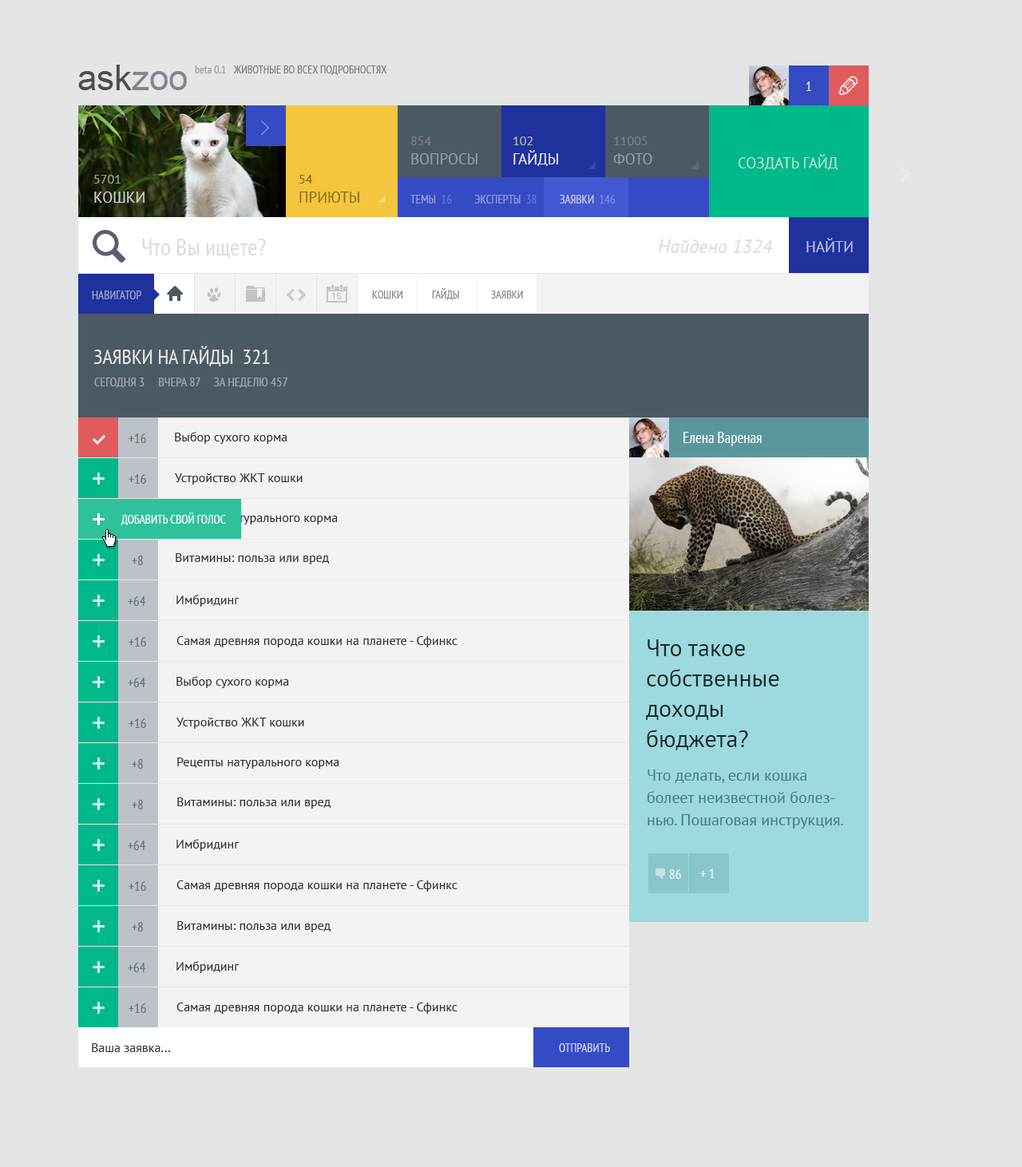
<style>
.page{position:relative;width:1022px;height:1167px;background:#e4e6e5}
.page>*{position:absolute;margin:0}
.t1{font:35.1px "ArialMT"}
.t2{font:11.2px "PTSans-Narrow";color:#9a9c9b}
.t3{font:11.2px "PTSans-Narrow";color:#737d82;text-transform:uppercase}
.t4{font:13.6px "PTSans-Narrow";color:#e1e3f4}
.t5{font:15.2px/19.2px "PTSans-Regular";color:#989ea3;text-transform:uppercase}
.t6{font:12.8px/19.2px "PTSans-Regular";color:#989ea3;text-transform:uppercase}
.t7{font:15.2px/19.2px "PTSans-Regular";color:#ebecee;text-transform:uppercase}
.t8{font:12.8px/19.2px "PTSans-Regular";color:#aeaeae;text-transform:uppercase}
.t9{font:12.8px/19.2px "PTSans-Regular";text-transform:uppercase}
.t10{font:15.2px/19.2px "PTSans-Regular";text-transform:uppercase}
.t11{font:15.2px "PTSans-Regular";color:#b8e4d5;text-transform:uppercase}
.t12{font:15.2px/19.2px "PTSans-Regular";color:#cdcecf;text-transform:uppercase}
.t13{font:12.8px/19.2px "PTSans-Regular";color:#cdcecf;text-transform:uppercase}
.t14{font:15.2px/19.2px "PTSans-Regular";color:#866c1d;text-transform:uppercase}
.t15{font:12.8px/19.2px "PTSans-Regular";color:#866c1d;text-transform:uppercase}
.t16{font:12px "PTSans-Narrow";text-transform:uppercase}
.t17{font:12px "PTSans-Narrow";color:#c1c5e5;text-transform:uppercase}
.t18{font:23.9px "PTSans-Narrow";color:#dddddd}
.t19{font:19.2px "PTSans-Italic";color:#dddddd}
.t20{font:15.2px "PTSans-Regular";color:#bcbfdb;text-transform:uppercase}
.t21{font:12px "PTSans-Narrow";color:#9ea3cd;text-transform:uppercase}
.t22{font:11.2px "PTSans-Narrow";color:#7b848a;text-transform:uppercase}
.t23{font:20.8px "PTSans-Narrow";color:#e3e4e5;text-transform:uppercase}
.t24{font:12.8px "PTSans-Narrow";color:#a2a8ac;text-transform:uppercase}
.t25{font:13.6px "PTSans-Narrow";color:#67727a}
.t26{font:12.8px "PTSans-Regular";color:#313131}
.t27{font:12.8px/39.9px "PTSans-Regular";color:#313131}
.t28{font:12px "PTSans-Narrow";color:#ffffff;text-transform:uppercase}
.t29{font:12.8px "PTSans-Regular";color:#343434}
.t30{font:12px "PTSans-Narrow";color:#d1d4ee;text-transform:uppercase}
</style>
<div class="page">
<p class="t1" style="left:78px;top:65px;width:109px;height:25px">askzoo</p>
<p class="t2" style="left:195px;top:65px;width:31px;height:8px">beta 0.1</p>
<p class="t3" style="left:233px;top:65px;width:154px;height:10px">животные во всех подробностях</p>
<p class="t4" style="left:805px;top:81px;width:6px;height:10px">1</p>
<p class="t5" style="left:411px;top:137px;width:66px;height:27px"><span class="t6">854<br></span>вопросы</p>
<p class="t7" style="left:513px;top:137px;width:45px;height:29px"><span class="t8">102<br></span>гайды</p>
<p class="t9" style="left:613px;top:137px;width:39px;height:27px">11005<br><span class="t10">фото</span></p>
<p class="t11" style="left:738px;top:154px;width:99px;height:16px">создать гайд</p>
<p class="t12" style="left:94px;top:175px;width:50px;height:28px"><span class="t13">5701<br></span>кошки</p>
<p class="t14" style="left:299px;top:175px;width:60px;height:28px"><span class="t15">54<br></span>приюты</p>
<p class="t16" style="left:410px;top:195px;width:205px;height:9px">темы  16         эксперты  38         заявки  146</p>
<p class="t17" style="left:560px;top:195px;width:55px;height:9px">заявки  146</p>
<p class="t18" style="left:142px;top:239px;width:124px;height:20px">Что Вы ищете?</p>
<p class="t19" style="left:658px;top:239px;width:115px;height:14px">Найдено 1324</p>
<p class="t20" style="left:806px;top:238px;width:47px;height:14px">Найти</p>
<p class="t21" style="left:92px;top:291px;width:49px;height:8px">навигатор</p>
<p class="t22" style="left:372px;top:291px;width:30px;height:8px">кошки</p>
<p class="t22" style="left:432px;top:288px;width:27px;height:12px">гайды</p>
<p class="t22" style="left:491px;top:291px;width:32px;height:8px">Заявки</p>
<p class="t23" style="left:93px;top:346px;width:177px;height:20px">заявки на гайды  321</p>
<p class="t24" style="left:94px;top:378px;width:193px;height:10px">сегодня 3     вчера 87     за неделю 457</p>
<p class="t25" style="left:129px;top:433px;width:17px;height:10px">+16</p>
<p class="t26" style="left:175px;top:432px;width:112px;height:12px">Выбор сухого корма</p>
<p class="t27" style="left:175px;top:473px;width:163px;height:91px">Устройство ЖКТ кошки<br>Рецепты натурального корма<br>Витамины: польза или вред</p>
<p class="t25" style="left:129px;top:474px;width:17px;height:10px">+16</p>
<p class="t28" style="left:121px;top:512px;width:105px;height:13px">добавить свой голос</p>
<p class="t25" style="left:132px;top:556px;width:11px;height:9px">+8</p>
<p class="t25" style="left:128px;top:596px;width:18px;height:10px">+64</p>
<p class="t26" style="left:176px;top:595px;width:63px;height:12px">Имбридинг</p>
<p class="t25" style="left:129px;top:637px;width:17px;height:10px">+16</p>
<p class="t26" style="left:176px;top:636px;width:281px;height:11px">Самая древняя порода кошки на планете - Сфинкс</p>
<p class="t25" style="left:128px;top:678px;width:18px;height:9px">+64</p>
<p class="t26" style="left:176px;top:676px;width:113px;height:12px">Выбор сухого корма</p>
<p class="t25" style="left:129px;top:718px;width:17px;height:10px">+16</p>
<p class="t27" style="left:176px;top:718px;width:163px;height:91px">Устройство ЖКТ кошки<br>Рецепты натурального корма<br>Витамины: польза или вред</p>
<p class="t25" style="left:132px;top:759px;width:11px;height:10px">+8</p>
<p class="t25" style="left:132px;top:800px;width:11px;height:9px">+8</p>
<p class="t25" style="left:128px;top:841px;width:18px;height:9px">+64</p>
<p class="t26" style="left:176px;top:839px;width:63px;height:12px">Имбридинг</p>
<p class="t25" style="left:129px;top:881px;width:17px;height:10px">+16</p>
<p class="t26" style="left:176px;top:880px;width:281px;height:12px">Самая древняя порода кошки на планете - Сфинкс</p>
<p class="t25" style="left:132px;top:922px;width:11px;height:10px">+8</p>
<p class="t26" style="left:177px;top:921px;width:153px;height:11px">Витамины: польза или вред</p>
<p class="t25" style="left:128px;top:963px;width:18px;height:9px">+64</p>
<p class="t26" style="left:176px;top:961px;width:63px;height:12px">Имбридинг</p>
<p class="t25" style="left:129px;top:1003px;width:17px;height:10px">+16</p>
<p class="t26" style="left:176px;top:1003px;width:281px;height:11px">Самая древняя порода кошки на планете - Сфинкс</p>
<p class="t29" style="left:92px;top:1043px;width:78px;height:9px">Ваша заявка...</p>
<p class="t30" style="left:559px;top:1043px;width:51px;height:9px">отправить</p>
</div>
